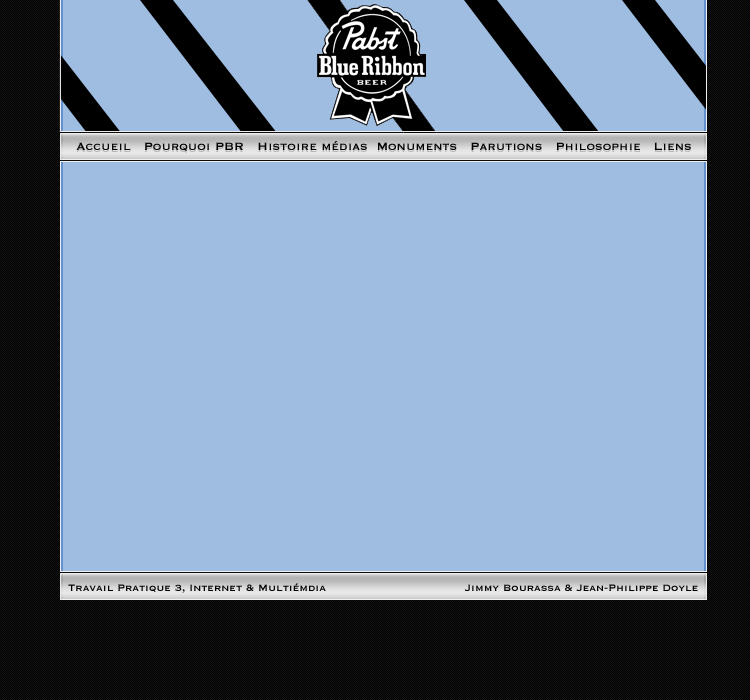
<style>
.page{position:relative;width:750px;height:700px;background:#9fbce1}
.page>*{position:absolute;margin:0}
.t1{font:14px "Copperplate";color:#000000}
.t2{font:12px "Copperplate";color:#000000}
</style>
<div class="page">
<p class="t1" style="left:76px;top:141px;width:615px;height:11px">Accueil   Pourquoi PBR   Histoire médias  Monuments   Parutions   Philosophie   Liens</p>
<p class="t2" style="left:68px;top:583px;width:258px;height:10px">Travail Pratique 3, Internet &amp; Multiémdia</p>
<p class="t2" style="left:464px;top:584px;width:234px;height:8px">Jimmy Bourassa &amp; Jean-Philippe Doyle</p>
</div>
